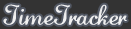
<style>
.page{position:relative;width:131px;height:29px;background:#333333}
.page>*{position:absolute;margin:0}
.t1{font:20.2px "LaurenScript";color:#ffffff}
</style>
<div class="page">
<p class="t1" style="left:3px;top:4px;width:124px;height:21px">TimeTracker</p>
</div>
